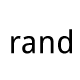
<style>
.page{position:relative;width:80px;height:80px;background:#ffffff}
.page>*{position:absolute;margin:0}
.t1{font:31.8px "DroidSans";color:#000000}
</style>
<div class="page">
<p class="t1" style="left:11px;top:29px;width:61px;height:25px">rand</p>
</div>
